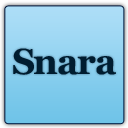
<style>
.page{position:relative;width:128px;height:128px}
.page>*{position:absolute;margin:0}
.t1{font:36px "Georgia-Bold";color:#001d30}
</style>
<div class="page">
<p class="t1" style="left:13px;top:48px;width:103px;height:27px">Snara</p>
</div>
